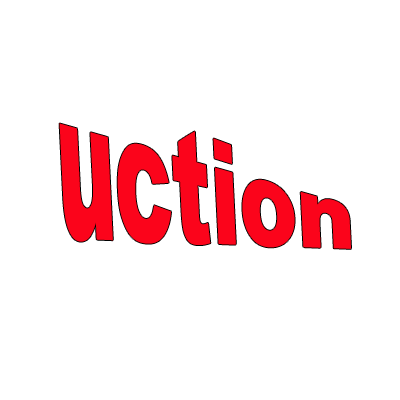
<style>
.page{position:relative;width:400px;height:400px;background:#ffffff}
.page>*{position:absolute;margin:0}
.t1{font:152.5px "Arial-Black";color:#fb041b;scale:0.57 1}
</style>
<div class="page">
<p class="t1" style="left:59px;top:123px;width:292px;height:126px;rotate:10deg">uction</p>
</div>
